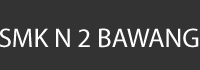
<style>
.page{position:relative;width:200px;height:70px;background:#333333}
.page>*{position:absolute;margin:0}
.t1{font:27px "MyriadPro-Regular";color:#ffffff}
</style>
<div class="page">
<p class="t1" style="left:0px;top:28px;width:199px;height:20px">SMK N 2 BAWANG</p>
</div>
